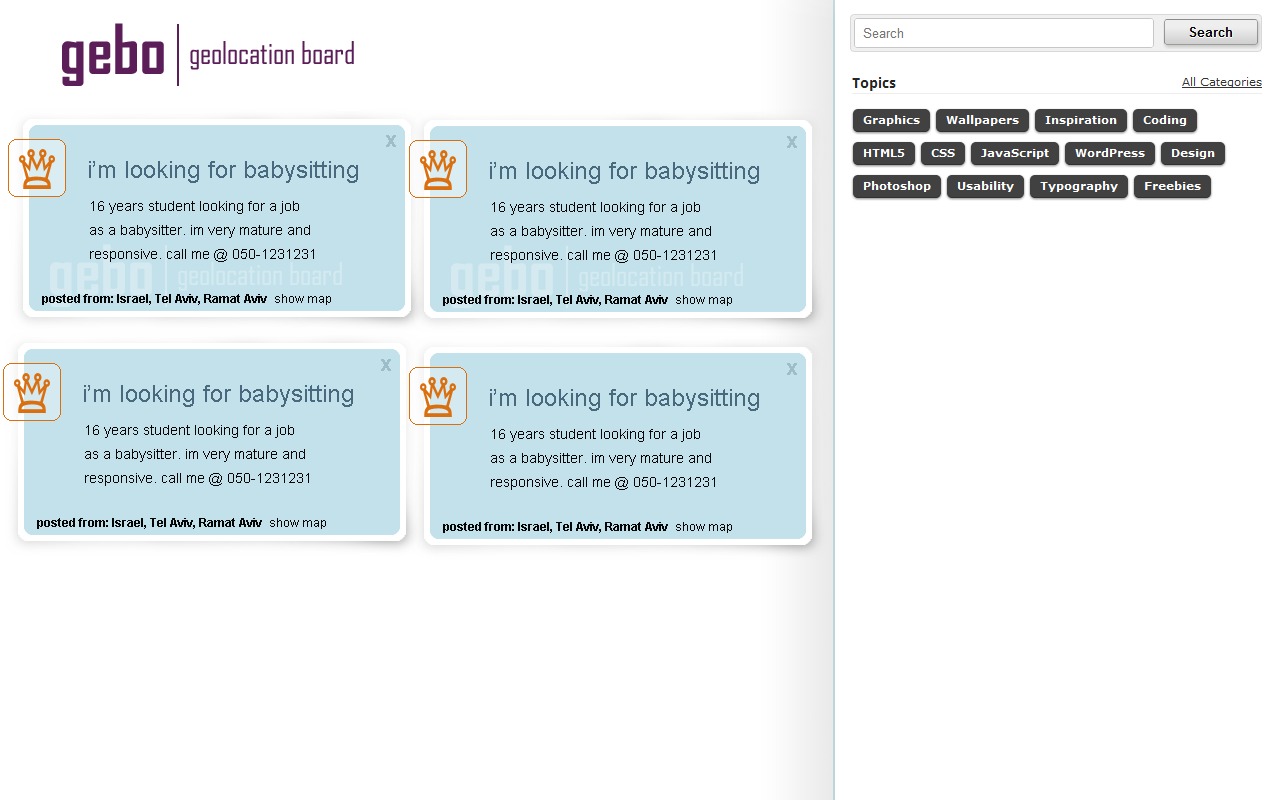
<style>
.page{position:relative;width:1280px;height:800px;background:#ffffff}
.page>*{position:absolute;margin:0}
.t1{font:66px "AgencyFB-Bold";color:#5b1e59}
.t2{font:30px "AgencyFB-Reg";color:#5b1e59}
.t3{font:15.9px "Arial-BoldMT";color:#9dbdc9;scale:1.13 1}
.t4{font:24px "ArialMT";color:#49697e}
.t5{font:14px/23.8px "ArialMT";color:#060607}
.t6{font:30px "AgencyFB-Reg";color:#d4eaf0}
.t7{font:12px "Arial-BoldMT";color:#060607}
.t8{font:12px "ArialMT";color:#060607}
</style>
<div class="page">
<p class="t1" style="left:62px;top:23px;width:102px;height:63px">gebo</p>
<p class="t2" style="left:190px;top:41px;width:164px;height:29px">geolocation board</p>
<p class="t3" style="left:386px;top:135px;width:10px;height:12px">X</p>
<p class="t3" style="left:787px;top:136px;width:10px;height:12px">X</p>
<p class="t4" style="left:89px;top:161px;width:269px;height:22px">i’m looking for babysitting</p>
<p class="t4" style="left:490px;top:162px;width:269px;height:22px">i’m looking for babysitting</p>
<p class="t5" style="left:90px;top:201px;width:224px;height:61px">16 years student looking for a job<br>as a babysitter. im very mature and<br>responsive. call me @ 050-1231231</p>
<p class="t5" style="left:491px;top:202px;width:224px;height:61px">16 years student looking for a job<br>as a babysitter. im very mature and<br>responsive. call me @ 050-1231231</p>
<p class="t6" style="left:178px;top:262px;width:164px;height:29px">geolocation board</p>
<p class="t6" style="left:579px;top:263px;width:164px;height:29px">geolocation board</p>
<p class="t7" style="left:42px;top:294px;width:225px;height:11px">posted from: Israel, Tel Aviv, Ramat Aviv</p>
<p class="t8" style="left:275px;top:294px;width:56px;height:11px">show map</p>
<p class="t7" style="left:443px;top:295px;width:225px;height:11px">posted from: Israel, Tel Aviv, Ramat Aviv</p>
<p class="t8" style="left:676px;top:295px;width:56px;height:11px">show map</p>
<p class="t3" style="left:381px;top:359px;width:10px;height:12px">X</p>
<p class="t3" style="left:787px;top:363px;width:10px;height:12px">X</p>
<p class="t4" style="left:84px;top:385px;width:269px;height:22px">i’m looking for babysitting</p>
<p class="t4" style="left:490px;top:389px;width:269px;height:22px">i’m looking for babysitting</p>
<p class="t5" style="left:85px;top:425px;width:224px;height:61px">16 years student looking for a job<br>as a babysitter. im very mature and<br>responsive. call me @ 050-1231231</p>
<p class="t5" style="left:491px;top:429px;width:224px;height:61px">16 years student looking for a job<br>as a babysitter. im very mature and<br>responsive. call me @ 050-1231231</p>
<p class="t7" style="left:37px;top:518px;width:225px;height:11px">posted from: Israel, Tel Aviv, Ramat Aviv</p>
<p class="t8" style="left:270px;top:518px;width:56px;height:11px">show map</p>
<p class="t7" style="left:443px;top:522px;width:225px;height:11px">posted from: Israel, Tel Aviv, Ramat Aviv</p>
<p class="t8" style="left:676px;top:522px;width:56px;height:11px">show map</p>
</div>
